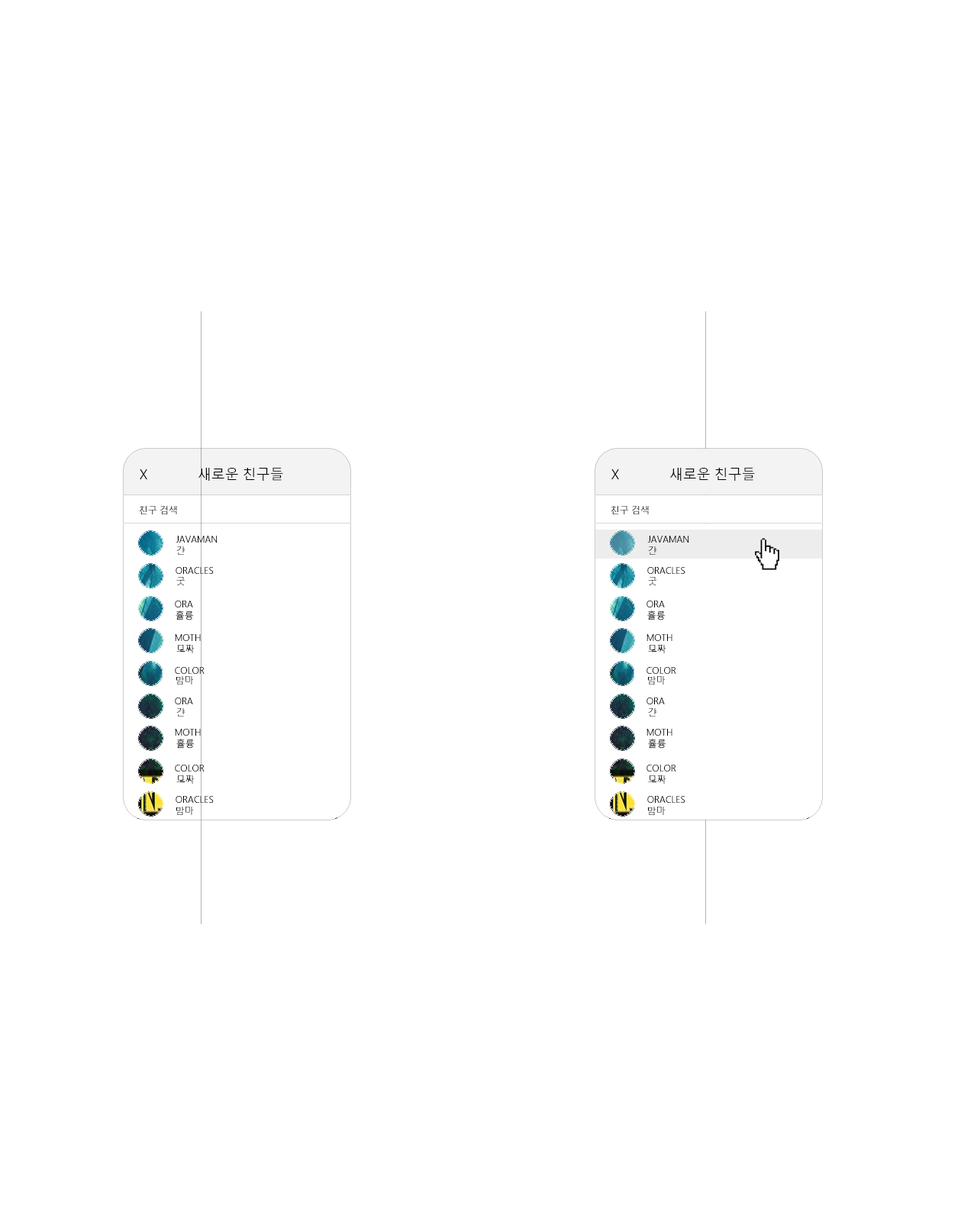
<style>
.page{position:relative;width:977px;height:1221px;background:#ffffff}
.page>*{position:absolute;margin:0}
.t1{font:13.7px "MalgunGothic-Semilight";color:#000000}
.t2{font:9.2px "MalgunGothic-Semilight"}
.t3{font:9.2px "MalgunGothic-Semilight";color:#000000}
</style>
<div class="page">
<p class="t1" style="left:140px;top:469px;width:7px;height:10px">X</p>
<p class="t1" style="left:198px;top:467px;width:85px;height:14px">새로운 친구들</p>
<p class="t1" style="left:611px;top:469px;width:8px;height:10px">X</p>
<p class="t1" style="left:670px;top:467px;width:85px;height:14px">새로운 친구들</p>
<p class="t2" style="left:139px;top:506px;width:38px;height:8px">친구 검색</p>
<p class="t2" style="left:610px;top:506px;width:39px;height:8px">친구 검색</p>
<p class="t3" style="left:176px;top:536px;width:41px;height:7px">JAVAMAN</p>
<p class="t3" style="left:647px;top:536px;width:42px;height:7px">JAVAMAN</p>
<p class="t2" style="left:176px;top:546px;width:9px;height:9px">갼</p>
<p class="t2" style="left:648px;top:546px;width:9px;height:9px">갼</p>
<p class="t3" style="left:176px;top:567px;width:38px;height:7px">ORACLES</p>
<p class="t3" style="left:647px;top:567px;width:38px;height:7px">ORACLES</p>
<p class="t2" style="left:176px;top:577px;width:9px;height:8px">굿</p>
<p class="t2" style="left:648px;top:577px;width:9px;height:8px">굿</p>
<p class="t3" style="left:175px;top:601px;width:18px;height:6px">ORA</p>
<p class="t3" style="left:646px;top:601px;width:19px;height:6px">ORA</p>
<p class="t2" style="left:176px;top:610px;width:18px;height:10px">휼륭</p>
<p class="t2" style="left:647px;top:610px;width:18px;height:10px">휼륭</p>
<p class="t3" style="left:175px;top:634px;width:26px;height:7px">MOTH</p>
<p class="t3" style="left:646px;top:634px;width:26px;height:7px">MOTH</p>
<p class="t3" style="left:176px;top:645px;width:19px;height:8px">모짜</p>
<p class="t3" style="left:648px;top:645px;width:18px;height:8px">모짜</p>
<p class="t3" style="left:175px;top:667px;width:29px;height:7px">COLOR</p>
<p class="t3" style="left:176px;top:676px;width:18px;height:8px">맘마</p>
<p class="t3" style="left:646px;top:667px;width:30px;height:7px">COLOR</p>
<p class="t3" style="left:648px;top:676px;width:17px;height:8px">맘마</p>
<p class="t3" style="left:175px;top:697px;width:18px;height:7px">ORA</p>
<p class="t3" style="left:646px;top:697px;width:19px;height:7px">ORA</p>
<p class="t2" style="left:176px;top:708px;width:9px;height:9px">갼</p>
<p class="t2" style="left:648px;top:708px;width:9px;height:9px">갼</p>
<p class="t3" style="left:175px;top:729px;width:26px;height:7px">MOTH</p>
<p class="t3" style="left:646px;top:729px;width:26px;height:7px">MOTH</p>
<p class="t2" style="left:176px;top:739px;width:19px;height:10px">휼륭</p>
<p class="t2" style="left:648px;top:739px;width:18px;height:10px">휼륭</p>
<p class="t3" style="left:175px;top:765px;width:29px;height:6px">COLOR</p>
<p class="t3" style="left:646px;top:765px;width:30px;height:6px">COLOR</p>
<p class="t3" style="left:176px;top:775px;width:19px;height:9px">모짜</p>
<p class="t3" style="left:648px;top:775px;width:18px;height:9px">모짜</p>
<p class="t3" style="left:176px;top:796px;width:38px;height:7px">ORACLES</p>
<p class="t3" style="left:647px;top:796px;width:38px;height:7px">ORACLES</p>
<p class="t3" style="left:176px;top:807px;width:18px;height:8px">맘마</p>
<p class="t3" style="left:648px;top:807px;width:17px;height:8px">맘마</p>
</div>
